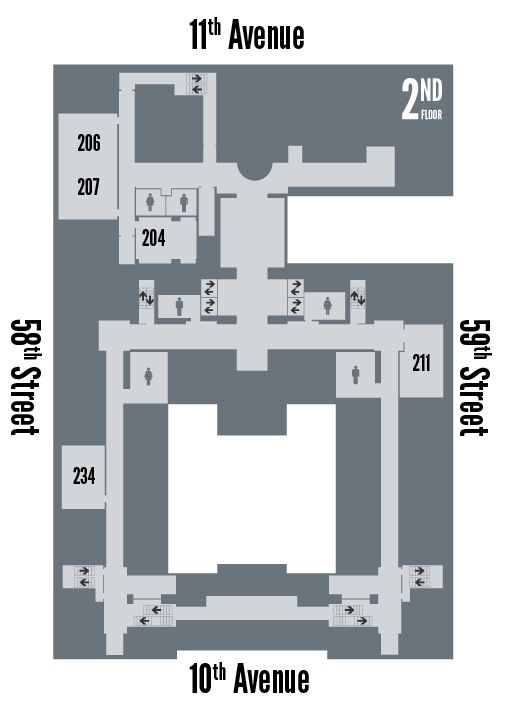
<style>
.page{position:relative;width:510px;height:712px;background:#ffffff}
.page>*{position:absolute;margin:0}
.t1{font:40.5px "LeagueGothic";color:#000100}
.t2{font:22.3px "LeagueGothic";color:#000100}
</style>
<div class="page">
<p class="t1" style="left:189px;top:17px;width:115px;height:32px">11th Avenue</p>
<p class="t2" style="left:78px;top:134px;width:22px;height:17px">206</p>
<p class="t2" style="left:78px;top:178px;width:22px;height:17px">207</p>
<p class="t2" style="left:142px;top:229px;width:23px;height:17px">204</p>
<p class="t1" style="left:11px;top:319px;width:31px;height:116px">58th Street</p>
<p class="t1" style="left:460px;top:320px;width:32px;height:116px">59th Street</p>
<p class="t2" style="left:413px;top:354px;width:17px;height:17px">211</p>
<p class="t2" style="left:73px;top:467px;width:22px;height:17px">234</p>
<p class="t1" style="left:189px;top:662px;width:120px;height:31px">10th Avenue</p>
</div>
